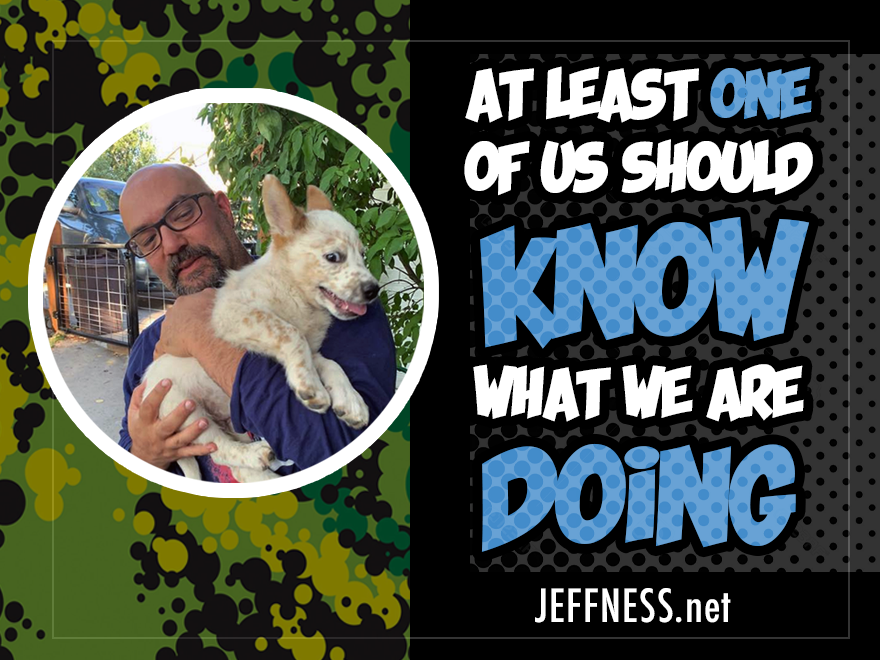
<style>
.page{position:relative;width:880px;height:660px;background:#000000}
.page>*{position:absolute;margin:0}
.t1{font:60.9px "KaBlam";letter-spacing:0.025em;color:#ffffff}
.t2{font:60.9px "KaBlam";letter-spacing:0.025em;color:#428bca}
.t3{font:139.1px/139.1px "KaBlam";letter-spacing:0.025em;color:#428bca}
.t4{font:60.9px/87px "KaBlam";letter-spacing:0.025em;color:#ffffff}
.t5{font:121.8px/121.8px "KaBlam";letter-spacing:0.025em;color:#428bca}
.t6{font:44.4px "Futura-CondensedMedium";letter-spacing:0.025em;color:#ffffff}
</style>
<div class="page">
<p class="t1" style="left:464px;top:66px;width:349px;height:486px;text-align:center">AT LEAST <span class="t2">ONE </span>OF US SHOULD <span class="t3">KNOW<br></span><span class="t4">WHAT WE ARE<br></span><span class="t5">DOING</span></p>
<p class="t6" style="left:535px;top:588px;width:196px;height:35px">JEFFNESS.net</p>
</div>
